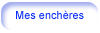
<style>
.page{position:relative;width:100px;height:33px;background:#ffffff}
.page>*{position:absolute;margin:0}
.t1{font:11px "ArialMT";color:#092ff6}
</style>
<div class="page">
<p class="t1" style="left:16px;top:10px;width:68px;height:9px">Mes enchères</p>
</div>
